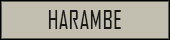
<style>
.page{position:relative;width:170px;height:40px;background:#c2bfb0}
.page>*{position:absolute;margin:0}
.t1{font:25.3px "AgencyFB-Reg";color:#191919;text-transform:uppercase}
</style>
<div class="page">
<p class="t1" style="left:48px;top:10px;width:73px;height:19px">HARAMBE</p>
</div>
